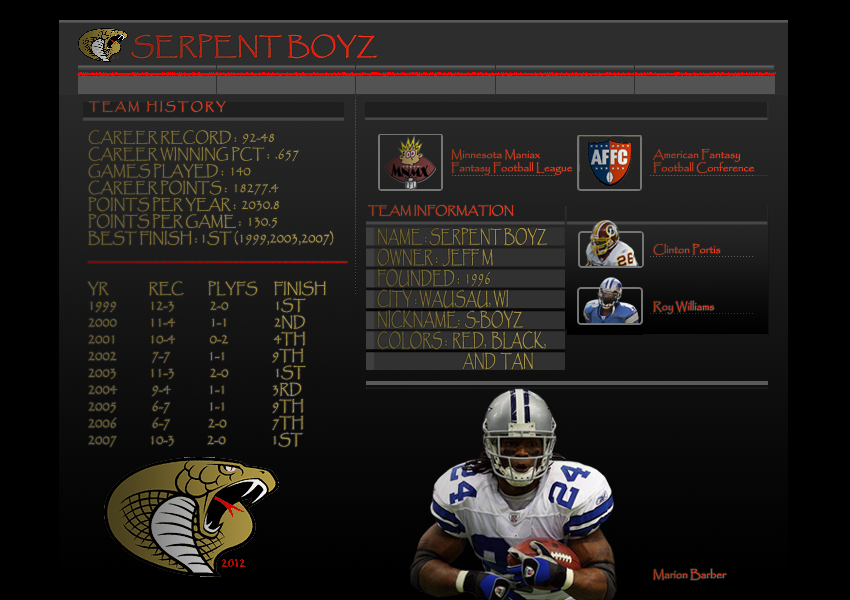
<style>
.page{position:relative;width:850px;height:600px;background:#000000}
.page>*{position:absolute;margin:0}
.t1{font:24px "Papyrus-Regular"}
.t2{font:11px "Papyrus-Regular"}
.t3{font:14px "Papyrus-Regular";color:#7e6e31;scale:0.9 1}
.t4{font:17.3px "Papyrus-Regular";scale:0.66 1}
</style>
<div class="page">
<p class="t1" style="left:131px;top:34px;width:246px;height:25px">SERPENT BOYZ</p>
<p class="t2" style="left:89px;top:100px;width:137px;height:12px">T E A M   H I S T O R Y</p>
<p class="t3" style="left:88px;top:130px;width:260px;height:317px">CAREER RECORD :  92-48<br>CAREER WINNING PCT :  .657<br>GAMES PLAYED :  140<br>CAREER POINTS :  18277.4<br>POINTS PER YEAR :  2030.8<br>POINTS PER GAME :  130.5<br>BEST FINISH : 1ST (1999,2003,2007)<br>____________________________________<br><br>YR               REC         PLYFS      FINISH<br>1999            12-3             2-0                 1ST<br>2000            11-4             1-1                 2ND<br>2001            10-4             0-2                 4TH<br>2002             7-7              1-1                 9TH<br>2003            11-3             2-0                 1ST<br>2004             9-4              1-1                 3RD<br>2005             6-7              1-1                 9TH<br>2006             6-7              2-0                 7TH<br>2007            10-3            2-0                 1ST</p>
<p class="t2" style="left:451px;top:149px;width:121px;height:27px">Minnesota Maniax<br>Fantasy Football League</p>
<p class="t2" style="left:653px;top:149px;width:101px;height:25px">American Fantasy <br>Football Conference</p>
<p class="t2" style="left:368px;top:204px;width:146px;height:12px">TEAM INFORMATION</p>
<p class="t4" style="left:377px;top:227px;width:170px;height:143px">NAME : SERPENT BOYZ<br>OWNER :  JEFF M<br>FOUNDED :  1996<br>CITY : WAUSAU, WI<br>NICKNAME:  S-BOYZ<br>COLORS :  RED,  BLACK,<br>                                   AND  TAN</p>
<p class="t2" style="left:653px;top:243px;width:68px;height:12px">Clinton Portis</p>
<p class="t2" style="left:653px;top:300px;width:61px;height:14px">Roy Williams</p>
<p class="t2" style="left:653px;top:568px;width:74px;height:12px">Marion Barber</p>
</div>
